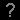
<style>
.page{position:relative;width:20px;height:20px;background:#000000}
.page>*{position:absolute;margin:0}
.t1{font:18.7px "ArialMT";color:#808080;scale:1.08 1}
</style>
<div class="page">
<p class="t1" style="left:6px;top:3px;width:9px;height:14px">?</p>
</div>
